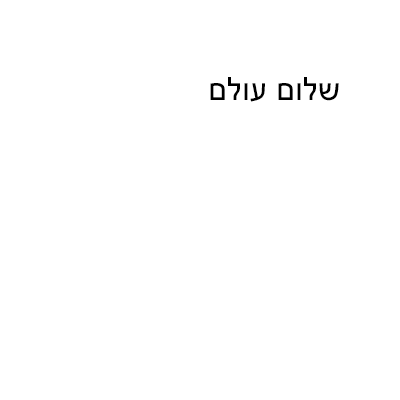
<style>
.page{position:relative;width:400px;height:400px;background:#ffffff}
.page>*{position:absolute;margin:0}
.t1{font:32px "ArialMT";color:#000000}
</style>
<div class="page">
<p class="t1" style="left:210px;top:77px;width:129px;height:25px">שלום עולם</p>
</div>
